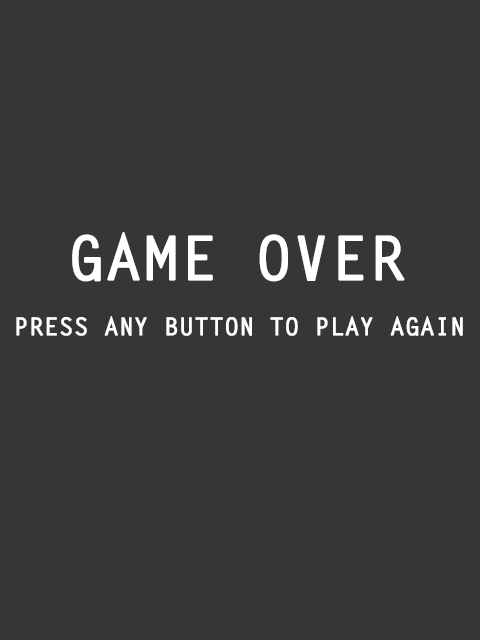
<style>
.page{position:relative;width:480px;height:640px;background:#363636}
.page>*{position:absolute;margin:0}
.t1{font:60px "LetterGothicStd-Bold";color:#ffffff;font-weight:bold}
.t2{font:24px "LetterGothicStd-Bold";color:#ffffff;font-weight:bold}
</style>
<div class="page">
<p class="t1" style="left:72px;top:232px;width:333px;height:50px">GAME OVER</p>
<p class="t2" style="left:16px;top:316px;width:447px;height:20px">PRESS ANY BUTTON TO PLAY AGAIN</p>
</div>
